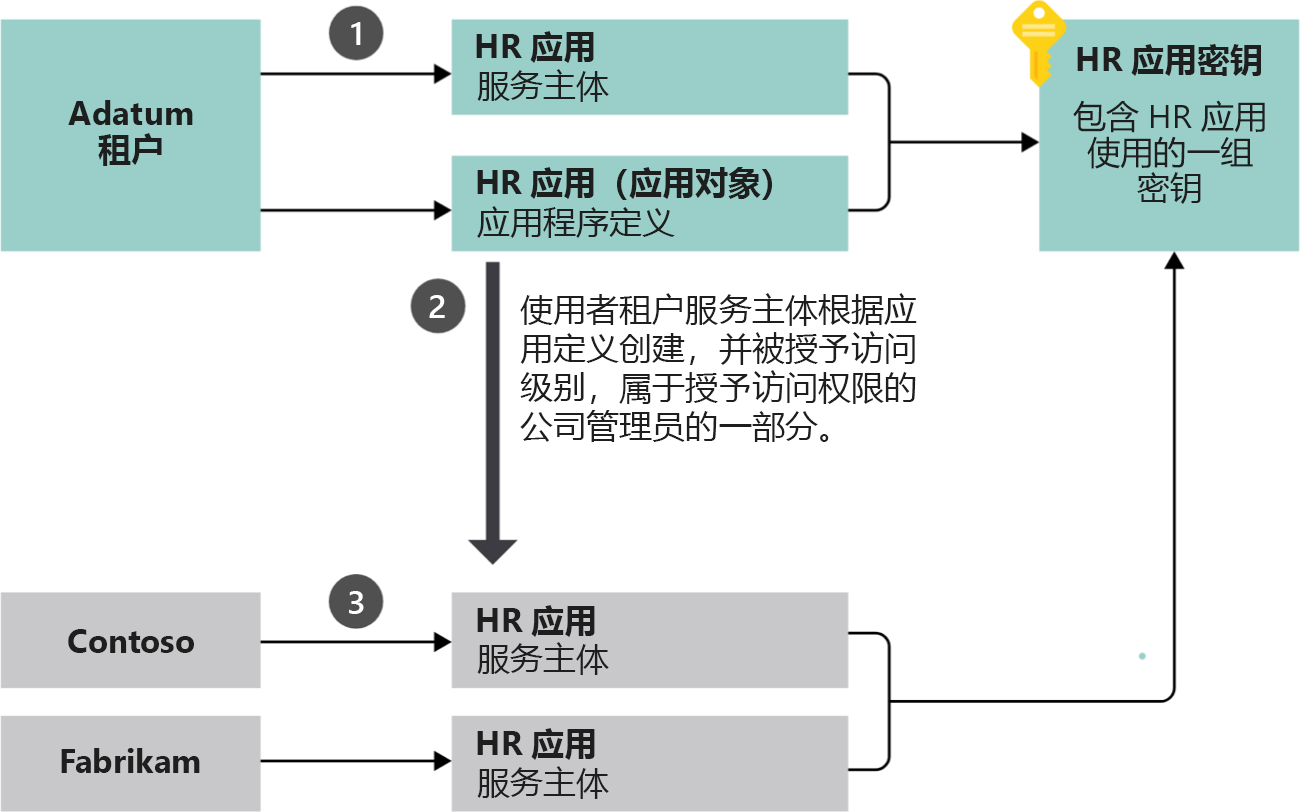
<style>
.page{position:relative;width:1300px;height:812px;background:#ffffff}
.page>*{position:absolute;margin:0}
.t1{font:32.5px "SegoeUI-Semibold";color:#ffffff;scale:1.04 1}
.t2{font:32.9px "SegoeUI-Bold";color:#1e1e1e}
.t3{font:32.9px "MicrosoftYaHei-Bold";color:#1e1e1e}
.t4{font:32.9px "MicrosoftYaHei";color:#1e1e1e}
.t5{font:32.9px/36px "SegoeUI-Bold";color:#1e1e1e}
.t6{font:32.9px/36px "MicrosoftYaHei-Bold";color:#1e1e1e}
.t7{font:32.9px/36px "MicrosoftYaHei";color:#1e1e1e}
.t8{font:32.9px/36px "SegoeUI";color:#1e1e1e}
.t9{font:32.9px/39px "MicrosoftYaHei";color:#1e1e1e}
</style>
<div class="page">
<p class="t1" style="left:351px;top:22px;width:10px;height:23px">1</p>
<p class="t2" style="left:476px;top:31px;width:118px;height:32px">HR <span class="t3">应用</span></p>
<p class="t3" style="left:1077px;top:44px;width:184px;height:32px"><span class="t2">HR </span>应用密钥</p>
<p class="t4" style="left:477px;top:69px;width:132px;height:33px">服务主体</p>
<p class="t5" style="left:68px;top:100px;width:125px;height:66px;text-align:center">Adatum <span class="t6">租户</span></p>
<p class="t7" style="left:1073px;top:100px;width:192px;height:104px;text-align:center">包含<span class="t8"> HR </span>应用使用的一组<br>密钥</p>
<p class="t3" style="left:477px;top:167px;width:295px;height:33px"><span class="t2">HR </span>应用（应用对象）</p>
<p class="t4" style="left:477px;top:206px;width:198px;height:32px">应用程序定义</p>
<p class="t9" style="left:520px;top:293px;width:397px;height:149px">使用者租户服务主体根据应用定义创建，并被授予访问级别，属于授予访问权限的公司管理员的一部分。</p>
<p class="t1" style="left:429px;top:295px;width:16px;height:23px">2</p>
<p class="t1" style="left:349px;top:591px;width:15px;height:23px">3</p>
<p class="t2" style="left:477px;top:605px;width:118px;height:32px">HR <span class="t3">应用</span></p>
<p class="t2" style="left:68px;top:629px;width:126px;height:24px">Contoso</p>
<p class="t4" style="left:477px;top:642px;width:132px;height:33px">服务主体</p>
<p class="t2" style="left:477px;top:728px;width:118px;height:32px">HR <span class="t3">应用</span></p>
<p class="t2" style="left:61px;top:748px;width:139px;height:25px">Fabrikam</p>
<p class="t4" style="left:477px;top:766px;width:132px;height:33px">服务主体</p>
</div>
